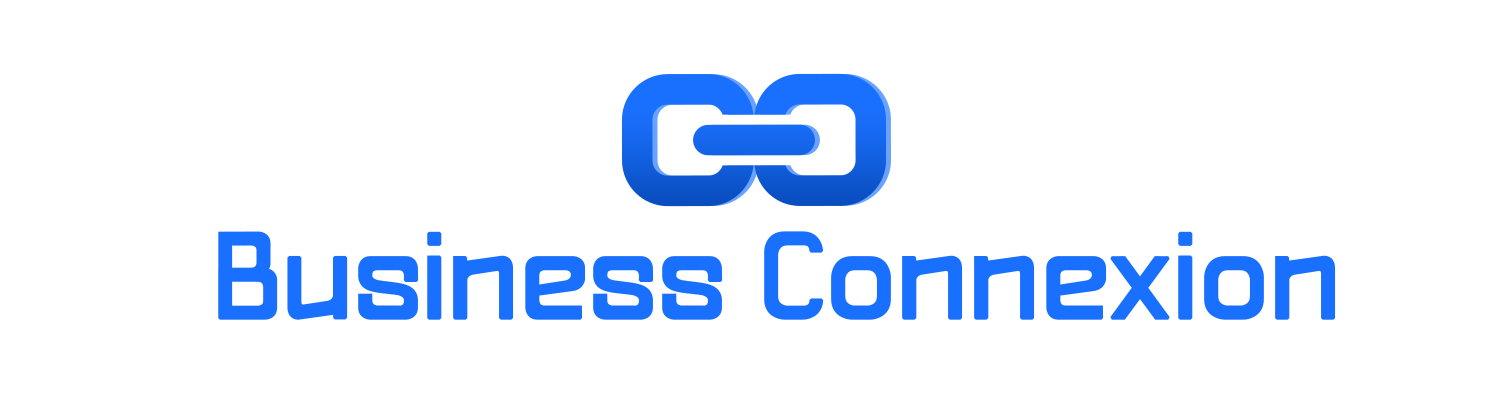
<style>
.page{position:relative;width:1500px;height:416px;background:#ffffff}
.page>*{position:absolute;margin:0}
.t1{font:120.8px "PatinioFutura";color:#1a70fe;font-weight:bold}
</style>
<div class="page">
<p class="t1" style="left:218px;top:231px;width:1118px;height:89px">Business Connexion</p>
</div>
